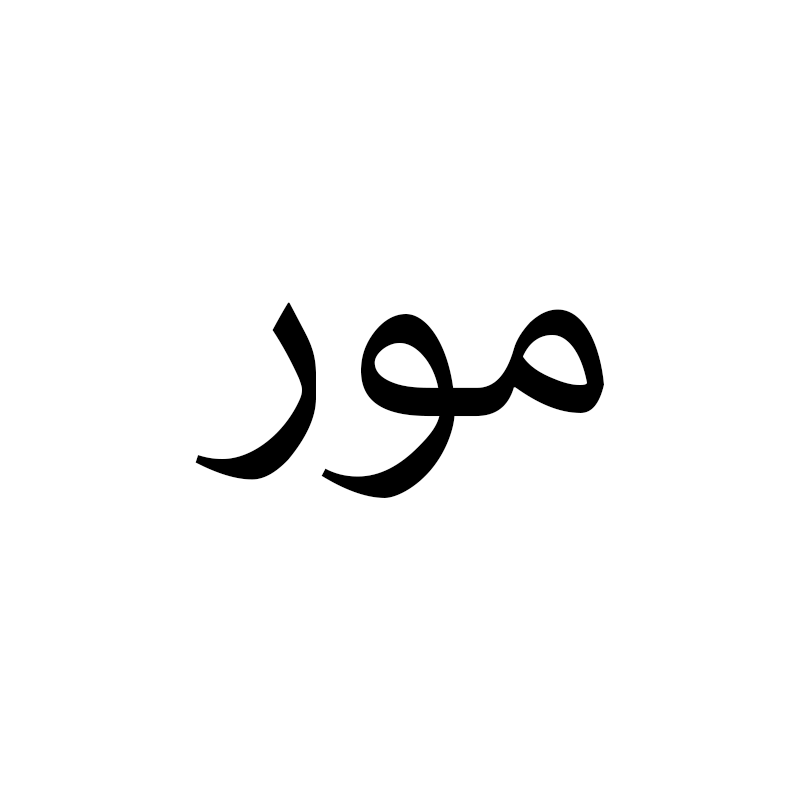
<style>
.page{position:relative;width:800px;height:800px;background:#ffffff}
.page>*{position:absolute;margin:0}
.t1{font:450px "AdobeArabic-Regular";color:#000000}
</style>
<div class="page">
<p class="t1" style="left:195px;top:302px;width:409px;height:196px">مور</p>
</div>
